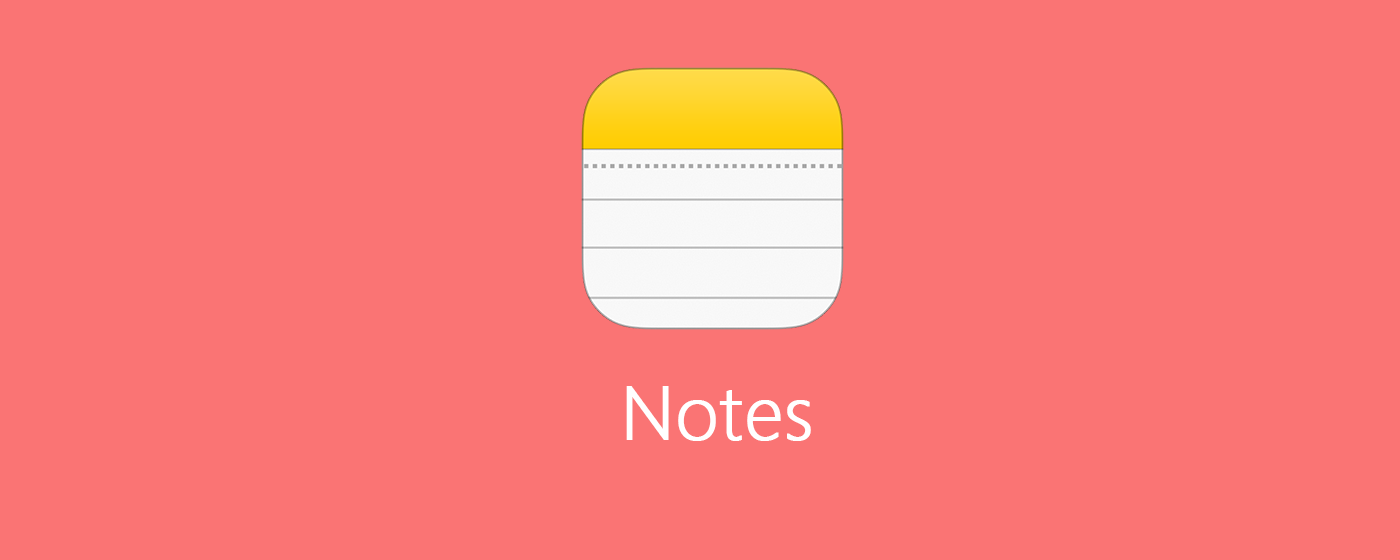
<style>
.page{position:relative;width:1400px;height:560px;background:#fa7474}
.page>*{position:absolute;margin:0}
.t1{font:75px "YuGothicUI-Light";color:#ffffff;font-weight:bold}
</style>
<div class="page">
<p class="t1" style="left:626px;top:386px;width:185px;height:55px">Notes</p>
</div>
